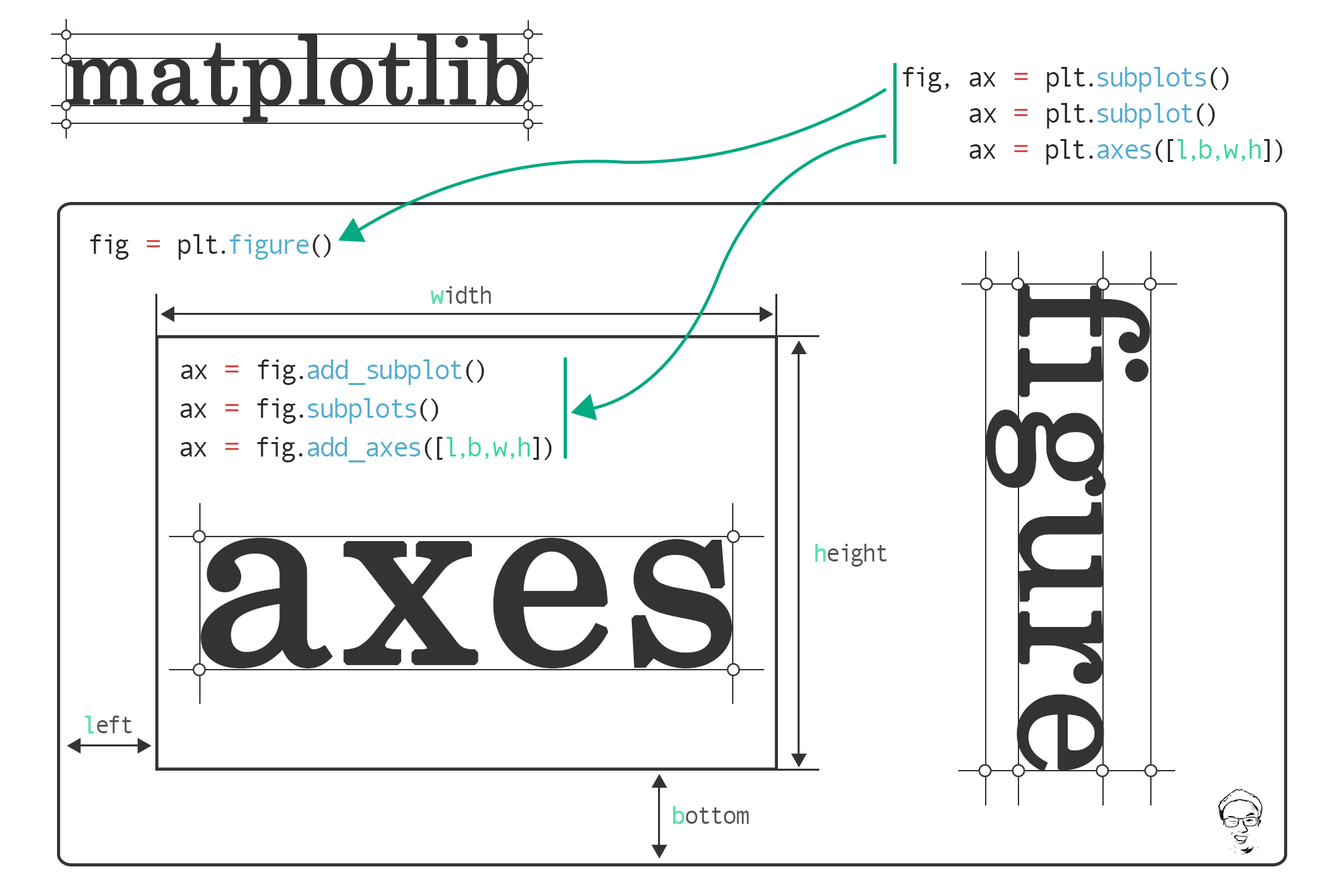
<style>
.page{position:relative;width:1337px;height:892px;background:#ffffff}
.page>*{position:absolute;margin:0}
.t1{font:92.9px "CenturySchoolbook";color:#333333;font-weight:bold}
.t2{font:27.9px "AndaleMono";color:#52acd0}
.t3{font:27.9px "AndaleMono";color:#282828}
.t4{font:27.9px "AndaleMono";color:#dc4646}
.t5{font:27.9px "AndaleMono";color:#35d99d}
.t6{font:27.9px "AndaleMono";color:#52aed0}
.t7{font:24.8px "AndaleMono";color:#535353}
.t8{font:24.8px "AndaleMono";color:#535353;font-weight:bold}
.t9{font:171.1px "CenturySchoolbook";color:#333333;font-weight:bold}
.t10{font:256.6px "CenturySchoolbook";color:#333333;font-weight:bold}
</style>
<div class="page">
<p class="t1" style="left:66px;top:34px;width:462px;height:89px">matplotlib</p>
<p class="t2" style="left:903px;top:67px;width:326px;height:25px"><span class="t3">fig, ax </span><span class="t4">=</span><span class="t3"> plt.</span>subplots<span class="t3">()</span></p>
<p class="t2" style="left:970px;top:103px;width:245px;height:25px"><span class="t3">ax </span><span class="t4">=</span><span class="t3"> plt.</span>subplot<span class="t3">()</span></p>
<p class="t5" style="left:970px;top:139px;width:313px;height:26px"><span class="t3">ax </span><span class="t4">=</span><span class="t3"> plt.</span><span class="t2">axes</span><span class="t3">([</span>l,b,w,h<span class="t3">])</span></p>
<p class="t6" style="left:90px;top:234px;width:241px;height:26px"><span class="t3">fig </span><span class="t4">=</span><span class="t3"> plt.</span>figure<span class="t3">()</span></p>
<p class="t7" style="left:431px;top:286px;width:60px;height:18px"><span class="t8">w</span>idth</p>
<p class="t9" style="left:986px;top:284px;width:165px;height:487px;rotate:90deg">figure</p>
<p class="t2" style="left:181px;top:359px;width:303px;height:26px"><span class="t3">ax </span><span class="t4">=</span><span class="t3"> fig.</span>add_subplot<span class="t3">()</span></p>
<p class="t2" style="left:180px;top:398px;width:259px;height:26px"><span class="t3">ax </span><span class="t4">=</span><span class="t3"> fig.</span>subplots<span class="t3">()</span></p>
<p class="t2" style="left:180px;top:437px;width:372px;height:25px"><span class="t3">ax </span><span class="t4">=</span><span class="t3"> fig.</span>add_axes<span class="t3">([</span><span class="t5">l,b,w,h</span><span class="t3">])</span></p>
<p class="t10" style="left:201px;top:537px;width:532px;height:132px">axes</p>
<p class="t7" style="left:816px;top:543px;width:71px;height:23px"><span class="t8">h</span>eight</p>
<p class="t7" style="left:85px;top:715px;width:47px;height:19px"><span class="t8">l</span>eft</p>
<p class="t7" style="left:673px;top:806px;width:76px;height:18px"><span class="t8">b</span>ottom</p>
</div>
